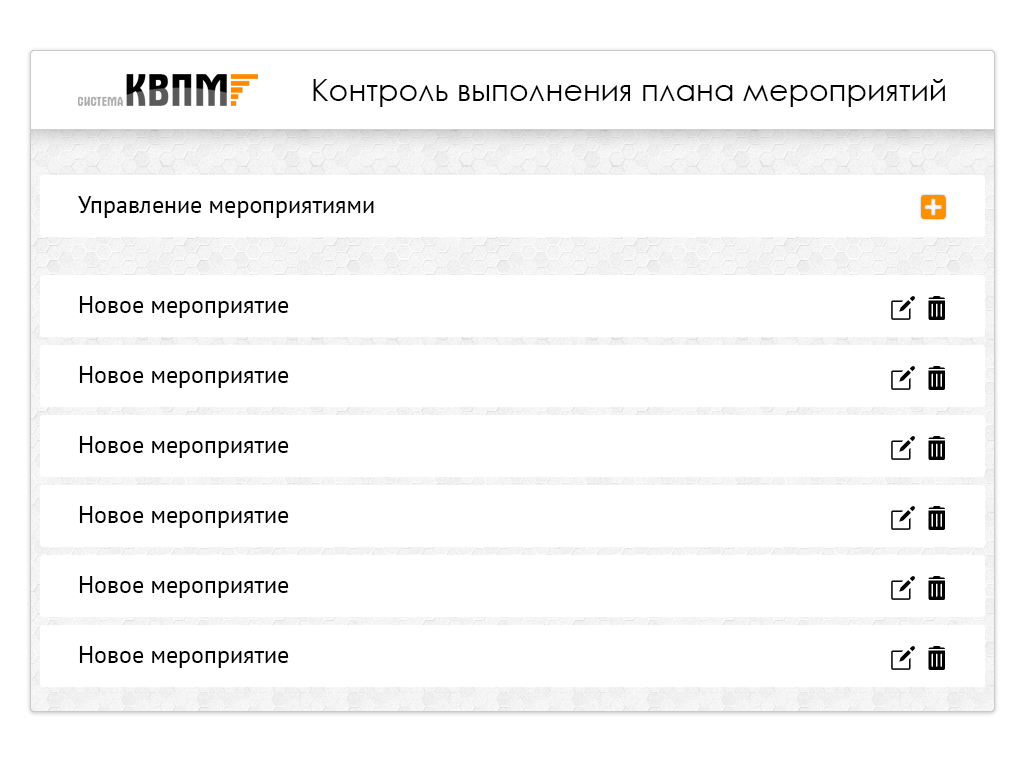
<style>
.page{position:relative;width:1024px;height:768px;background:#ffffff}
.page>*{position:absolute;margin:0}
.t1{font:30px "CenturyGothic";color:#000000}
.t2{font:24px "PTSans-Regular";color:#010101}
</style>
<div class="page">
<p class="t1" style="left:313px;top:79px;width:632px;height:28px">Контроль выполнения плана мероприятий</p>
<p class="t2" style="left:78px;top:196px;width:296px;height:22px">Управление мероприятиями</p>
<p class="t2" style="left:79px;top:296px;width:210px;height:22px">Новое мероприятие</p>
<p class="t2" style="left:79px;top:366px;width:210px;height:22px">Новое мероприятие</p>
<p class="t2" style="left:79px;top:436px;width:210px;height:22px">Новое мероприятие</p>
<p class="t2" style="left:79px;top:506px;width:210px;height:22px">Новое мероприятие</p>
<p class="t2" style="left:79px;top:576px;width:210px;height:22px">Новое мероприятие</p>
<p class="t2" style="left:79px;top:646px;width:210px;height:22px">Новое мероприятие</p>
</div>
